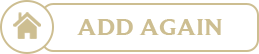
<style>
.page{position:relative;width:259px;height:54px;background:#ffffff}
.page>*{position:absolute;margin:0}
.t1{font:24.3px "BeaufortforLOL-Bold";color:#cdbe91;scale:1.06 1}
</style>
<div class="page">
<p class="t1" style="left:77px;top:19px;width:145px;height:16px">ADD AGAIN</p>
</div>
